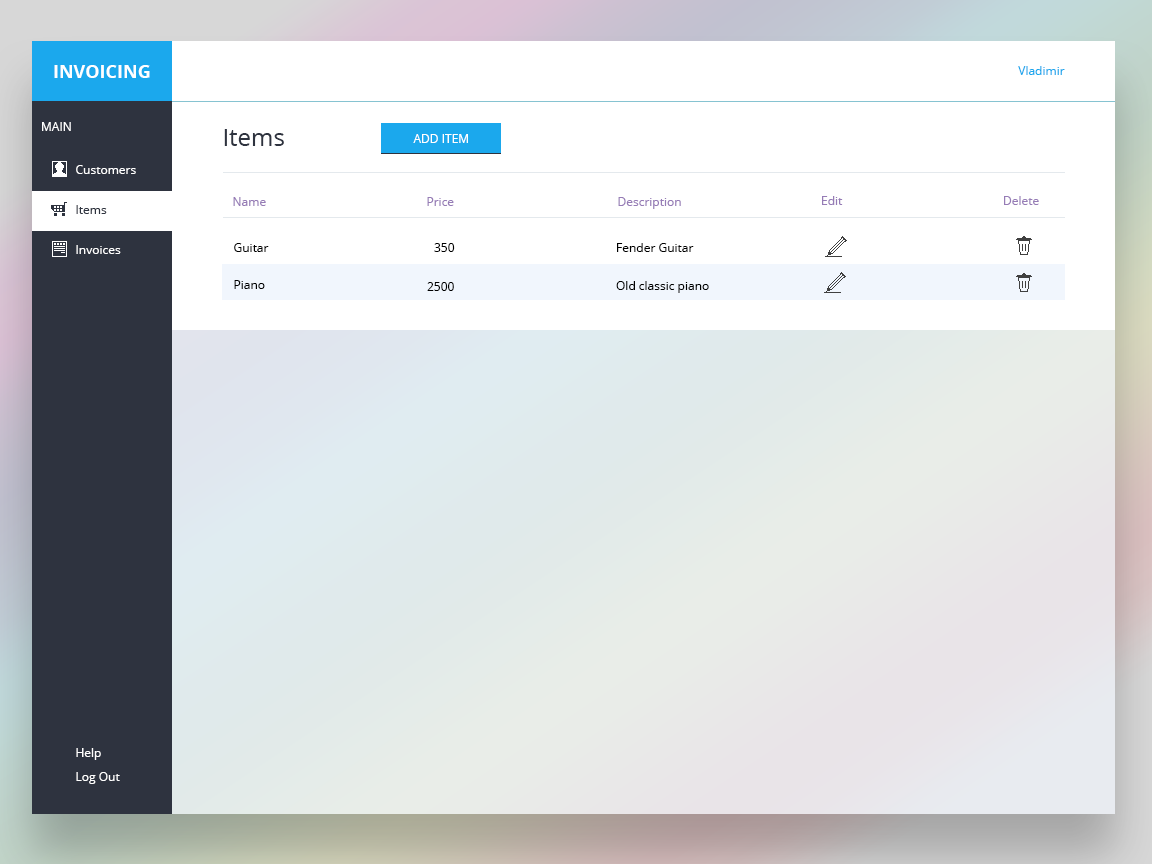
<style>
.page{position:relative;width:1152px;height:864px;background:#ffffff}
.page>*{position:absolute;margin:0}
.t1{font:18px "OpenSans-Bold";color:#ffffff}
.t2{font:12px "OpenSans";color:#1ba8ed}
.t3{font:12px "OpenSans";color:#ffffff}
.t4{font:24px "OpenSans";color:#2e333f}
.t5{font:12px "OpenSans";color:#967cb6}
.t6{font:12px "OpenSans";color:#2e333f}
.t7{font:12px "OpenSans";color:#000000}
</style>
<div class="page">
<p class="t1" style="left:54px;top:65px;width:96px;height:13px">INVOICING</p>
<p class="t2" style="left:1018px;top:66px;width:47px;height:9px">Vladimir</p>
<p class="t3" style="left:42px;top:122px;width:29px;height:9px">MAIN</p>
<p class="t4" style="left:224px;top:129px;width:60px;height:17px">Items</p>
<p class="t3" style="left:413px;top:134px;width:55px;height:9px">ADD ITEM</p>
<p class="t3" style="left:76px;top:165px;width:60px;height:9px">Customers</p>
<p class="t5" style="left:233px;top:197px;width:33px;height:9px">Name</p>
<p class="t5" style="left:427px;top:197px;width:27px;height:9px">Price</p>
<p class="t5" style="left:618px;top:197px;width:63px;height:12px">Description</p>
<p class="t5" style="left:822px;top:196px;width:21px;height:9px">Edit</p>
<p class="t5" style="left:1004px;top:196px;width:35px;height:9px">Delete</p>
<p class="t6" style="left:76px;top:205px;width:31px;height:9px">Items</p>
<p class="t3" style="left:76px;top:245px;width:45px;height:9px">Invoices</p>
<p class="t7" style="left:234px;top:243px;width:35px;height:9px">Guitar</p>
<p class="t7" style="left:434px;top:243px;width:21px;height:9px">350</p>
<p class="t7" style="left:617px;top:243px;width:77px;height:9px">Fender Guitar</p>
<p class="t7" style="left:234px;top:280px;width:31px;height:9px">Piano</p>
<p class="t7" style="left:616px;top:281px;width:93px;height:12px">Old classic piano</p>
<p class="t7" style="left:427px;top:282px;width:27px;height:9px">2500</p>
<p class="t3" style="left:76px;top:748px;width:25px;height:12px">Help</p>
<p class="t3" style="left:76px;top:772px;width:44px;height:12px">Log Out</p>
</div>
